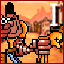
<style>
.page{position:relative;width:64px;height:64px;background:#000000}
.page>*{position:absolute;margin:0}
.t1{font:32px "Gadugi";color:#ffffff}
</style>
<div class="page">
<p class="t1" style="left:50px;top:3px;width:8px;height:23px">I</p>
</div>
